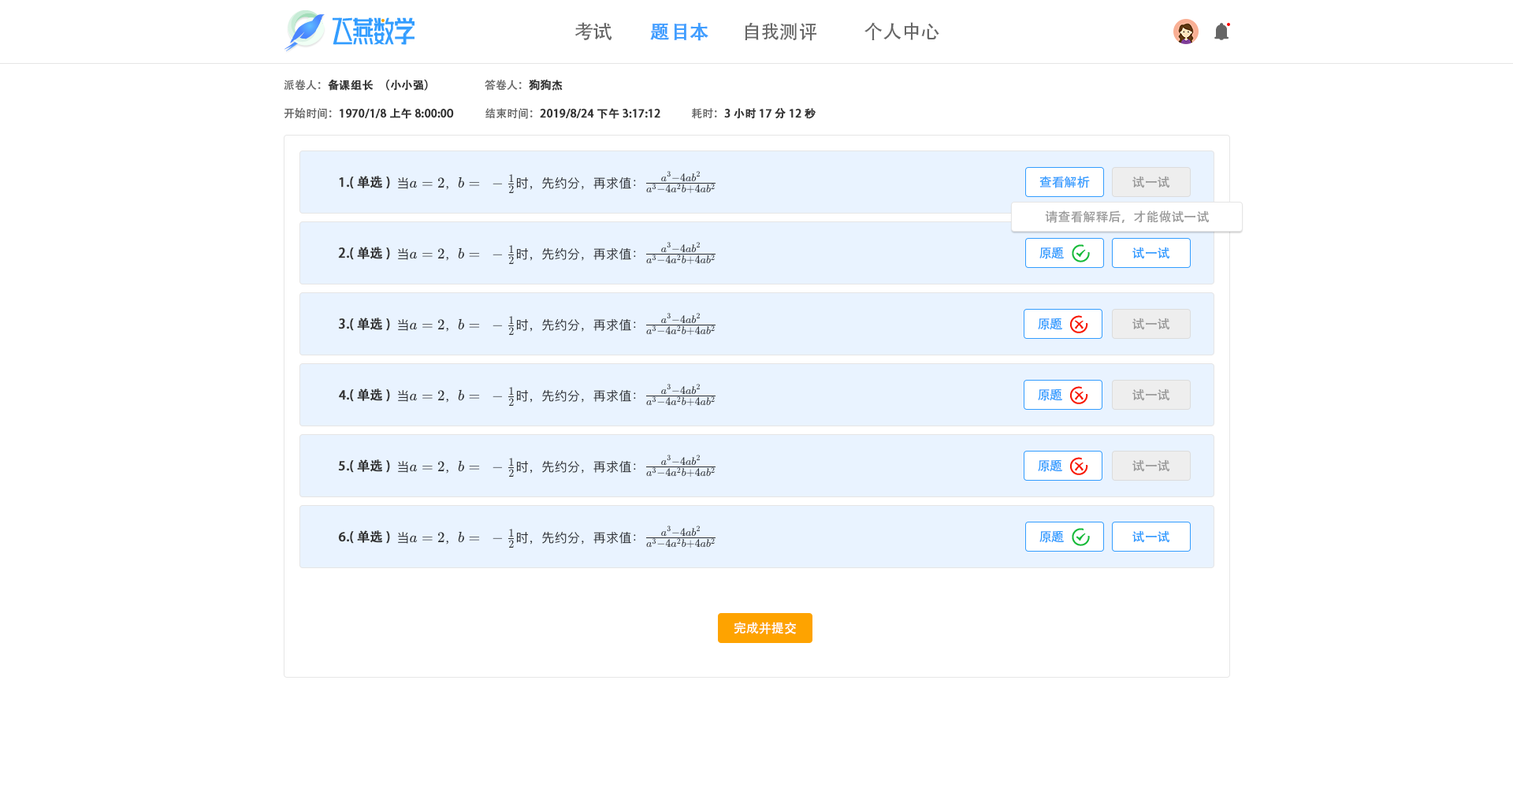
<style>
.page{position:relative;width:1513px;height:788px;background:#ffffff}
.page>*{position:absolute;margin:0}
.t1{font:18.9px "AdobeHeitiStd-Regular";color:#666666}
.t2{font:18.9px "AdobeHeitiStd-Regular";color:#409eff;font-weight:bold}
.t3{font:11px "AdobeHeitiStd-Regular";color:#333333;font-weight:bold}
.t4{font:11px "AdobeHeitiStd-Regular";color:#666666}
.t5{font:12.6px "AdobeHeitiStd-Regular";color:#333333;font-weight:bold}
.t6{font:12.6px "AdobeHeitiStd-Regular";color:#339dff}
.t7{font:12.6px "AdobeHeitiStd-Regular";color:#999999}
.t8{font:12.6px "AdobeHeitiStd-Regular";color:#ffffff}
</style>
<div class="page">
<p class="t1" style="left:575px;top:22px;width:37px;height:18px">考试</p>
<p class="t2" style="left:650px;top:23px;width:58px;height:18px">题目本</p>
<p class="t1" style="left:745px;top:22px;width:71px;height:19px">自我测评</p>
<p class="t1" style="left:865px;top:22px;width:74px;height:18px">个人中心</p>
<p class="t3" style="left:284px;top:80px;width:144px;height:11px"><span class="t4">派卷人：</span>备课组长（小小强）</p>
<p class="t4" style="left:485px;top:79px;width:78px;height:12px">答卷人：<span class="t3">狗狗杰</span></p>
<p class="t3" style="left:284px;top:108px;width:170px;height:11px"><span class="t4">开始时间：</span>1970/1/8 上午8:00:00</p>
<p class="t3" style="left:485px;top:108px;width:175px;height:11px"><span class="t4">结束时间：</span>2019/8/24 下午3:17:12</p>
<p class="t3" style="left:692px;top:108px;width:124px;height:11px"><span class="t4">耗时：</span>3小时17分12秒</p>
<p class="t5" style="left:339px;top:176px;width:51px;height:13px">1.(单选)</p>
<p class="t6" style="left:1039px;top:176px;width:51px;height:12px">查看解析</p>
<p class="t7" style="left:1132px;top:176px;width:38px;height:12px">试一试</p>
<p class="t7" style="left:1045px;top:210px;width:165px;height:13px">请查看解释后，才能做试一试</p>
<p class="t5" style="left:338px;top:247px;width:52px;height:13px">2.(单选)</p>
<p class="t6" style="left:1039px;top:247px;width:25px;height:12px">原题</p>
<p class="t6" style="left:1132px;top:247px;width:38px;height:12px">试一试</p>
<p class="t5" style="left:338px;top:318px;width:52px;height:13px">3.(单选)</p>
<p class="t6" style="left:1038px;top:318px;width:24px;height:12px">原题</p>
<p class="t7" style="left:1132px;top:318px;width:38px;height:12px">试一试</p>
<p class="t5" style="left:339px;top:389px;width:51px;height:13px">4.(单选)</p>
<p class="t6" style="left:1038px;top:389px;width:24px;height:12px">原题</p>
<p class="t7" style="left:1132px;top:389px;width:38px;height:12px">试一试</p>
<p class="t5" style="left:338px;top:459px;width:52px;height:14px">5.(单选)</p>
<p class="t6" style="left:1038px;top:459px;width:24px;height:13px">原题</p>
<p class="t7" style="left:1132px;top:459px;width:38px;height:13px">试一试</p>
<p class="t5" style="left:338px;top:530px;width:52px;height:14px">6.(单选)</p>
<p class="t6" style="left:1039px;top:530px;width:25px;height:13px">原题</p>
<p class="t6" style="left:1132px;top:530px;width:38px;height:13px">试一试</p>
<p class="t8" style="left:734px;top:622px;width:62px;height:12px">完成并提交</p>
</div>
